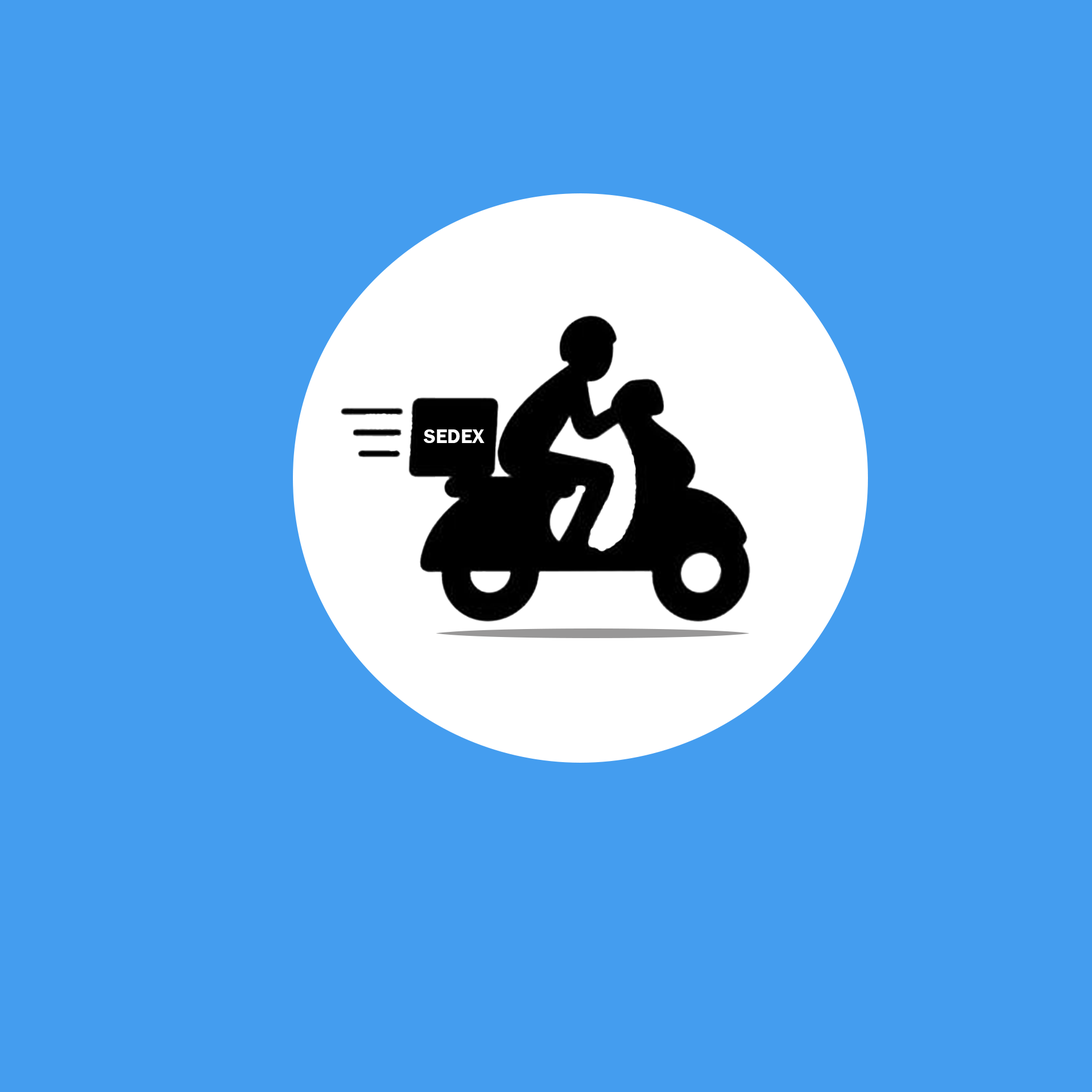
<style>
.page{position:relative;width:1092px;height:1092px;background:#449def}
.page>*{position:absolute;margin:0}
.t1{font:20.5px "FranklinGothic-Demi";color:#fefefe}
</style>
<div class="page">
<p class="t1" style="left:424px;top:429px;width:61px;height:14px">SEDEX</p>
</div>
